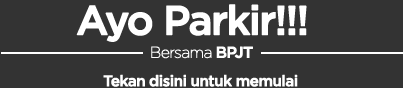
<style>
.page{position:relative;width:403px;height:88px;background:#333333}
.page>*{position:absolute;margin:0}
.t1{font:40.7px "iCielGotham-Medium";letter-spacing:-0.06em;color:#ffffff;font-weight:bold}
.t2{font:15.6px "iCielGotham-Thin";letter-spacing:-0.06em;color:#ffffff;font-weight:bold}
.t3{font:15.6px "iCielGotham-Medium";letter-spacing:-0.06em;color:#ffffff;font-weight:bold}
.t4{font:15.3px "iCielGotham-Medium";letter-spacing:-0.06em;color:#ffffff;font-weight:bold}
</style>
<div class="page">
<p class="t1" style="left:76px;top:4px;width:231px;height:38px">Ayo Parkir!!!</p>
<p class="t2" style="left:151px;top:46px;width:102px;height:13px">Bersama <span class="t3">BPJT</span></p>
<p class="t4" style="left:103px;top:74px;width:195px;height:13px">Tekan disini untuk memulai</p>
</div>
